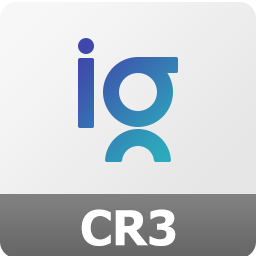
<style>
.page{position:relative;width:256px;height:256px}
.page>*{position:absolute;margin:0}
.t1{font:48px "Tahoma-Bold";color:#ffffff}
</style>
<div class="page">
<p class="t1" style="left:81px;top:209px;width:95px;height:37px">CR3</p>
</div>
